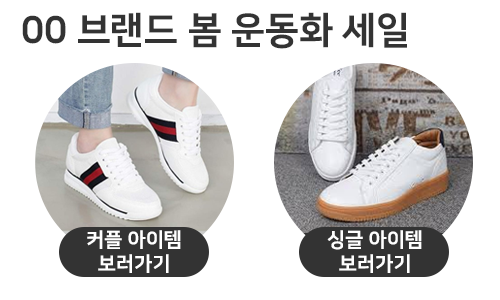
<style>
.page{position:relative;width:500px;height:300px;background:#ffffff}
.page>*{position:absolute;margin:0}
.t1{font:37.3px "NanumSquareEB";color:#333333}
.t2{font:20px "NanumSquareEB";color:#ffffff}
</style>
<div class="page">
<p class="t1" style="left:22px;top:12px;width:385px;height:37px">00 브랜드 봄 운동화 세일</p>
<p class="t2" style="left:87px;top:230px;width:94px;height:43px;text-align:center">커플 아이템<br>보러가기</p>
<p class="t2" style="left:327px;top:230px;width:95px;height:43px;text-align:center">싱글 아이템<br>보러가기</p>
</div>
